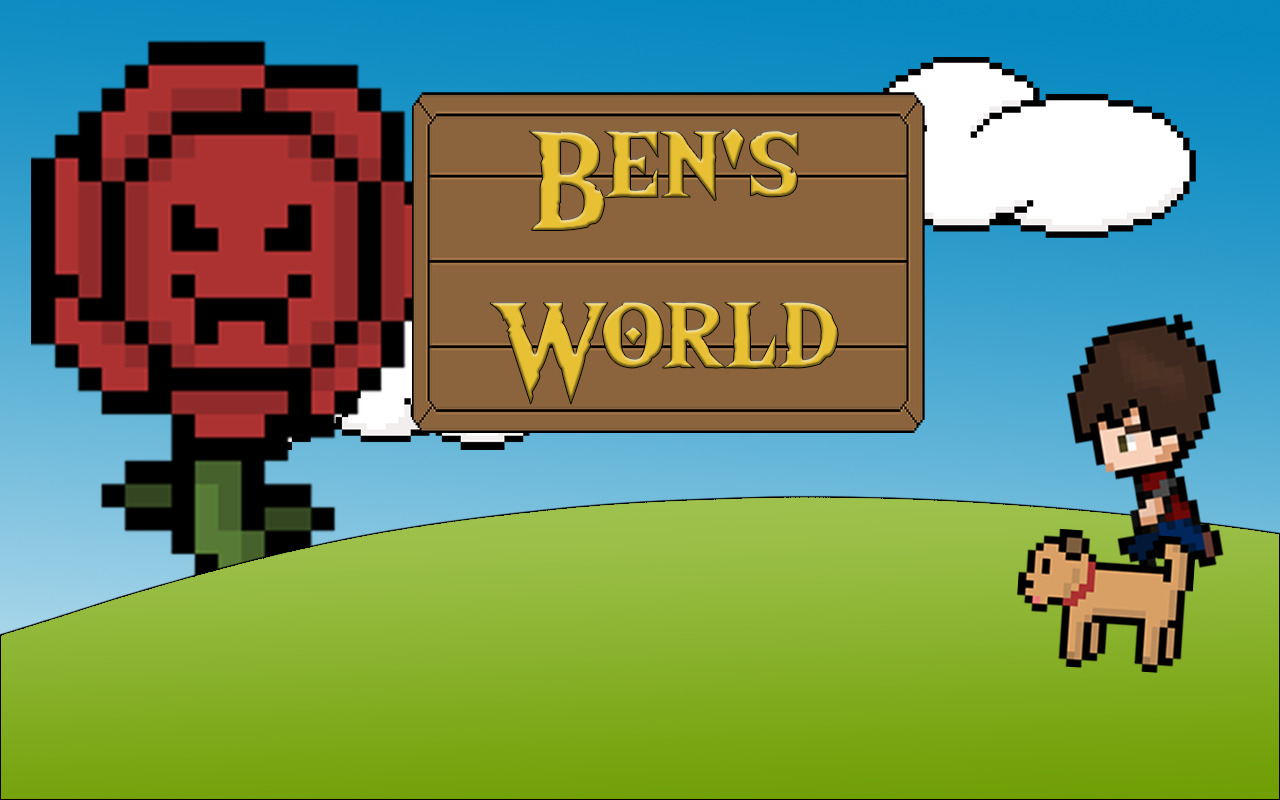
<style>
.page{position:relative;width:1280px;height:800px}
.page>*{position:absolute;margin:0}
.t1{font:143px "TheWildBreathofZelda"}
</style>
<div class="page">
<p class="t1" style="left:489px;top:128px;width:350px;height:277px;text-align:center">Ben's<br>World</p>
</div>
